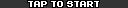
<style>
.page{position:relative;width:128px;height:8px;background:#333333}
.page>*{position:absolute;margin:0}
.t1{font:7px "MegaMan-2";color:#ffffff}
</style>
<div class="page">
<p class="t1" style="left:28px;top:1px;width:71px;height:6px">TAP TO START</p>
</div>
